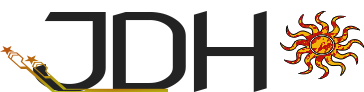
<style>
.page{position:relative;width:364px;height:92px;background:#ffffff}
.page>*{position:absolute;margin:0}
.t1{font:110px "NovaMonoForPowerline";letter-spacing:-0.075em;color:#232323;scale:1.5 1}
</style>
<div class="page">
<p class="t1" style="left:32px;top:11px;width:235px;height:81px">JDH</p>
</div>
